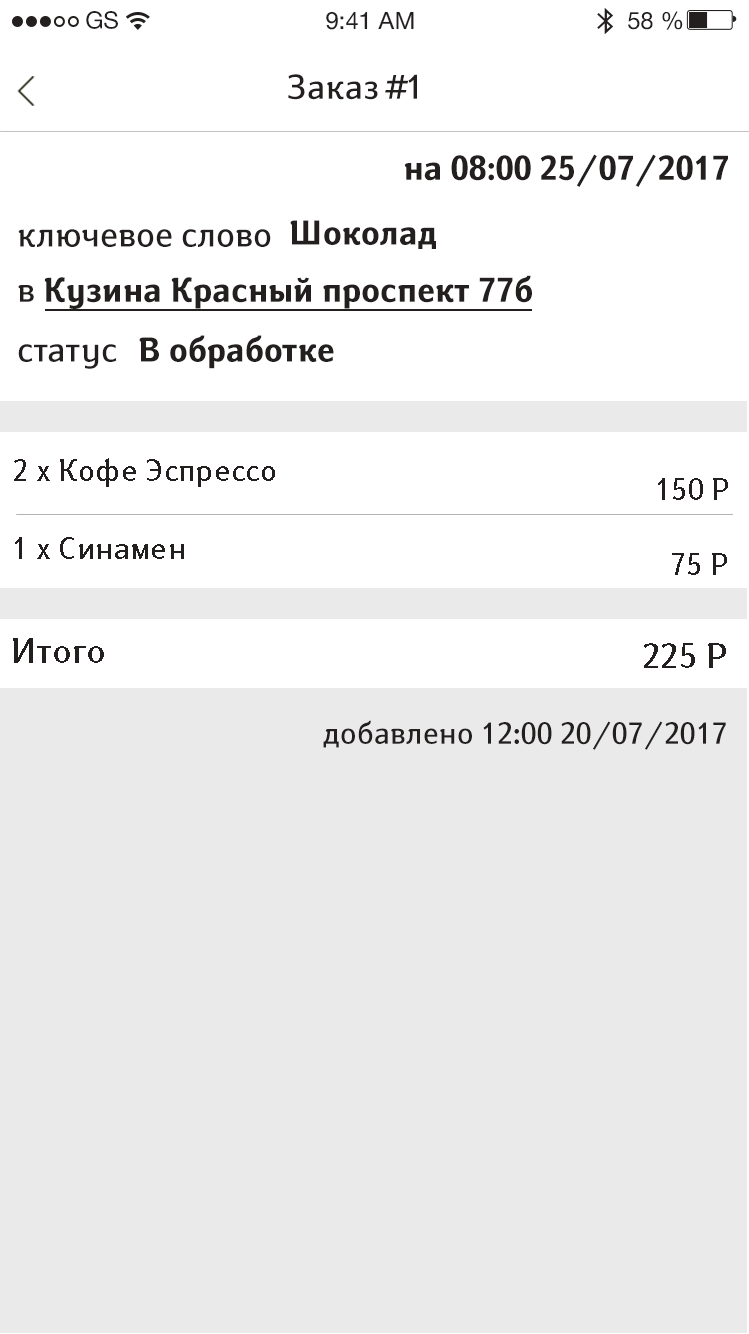
<style>
.page{position:relative;width:749px;height:1334px;background:#eaeaea}
.page>*{position:absolute;margin:0}
.t1{font:24px "HelveticaNeueCyr-Roman";color:#221f1e}
.t2{font:34px "SusanBook-Regular";color:#221f1e}
.t3{font:34px "SusanBold-Regular";color:#221f1e}
.t4{font:30px "SusanBook-Regular";letter-spacing:0.012em;color:#221f1e}
.t5{font:34px "SusanBook-Regular";letter-spacing:0.012em;color:#221f1e}
.t6{font:30px "SusanBook-Regular";color:#221f1e}
</style>
<div class="page">
<p class="t1" style="left:86px;top:11px;width:32px;height:18px">GS</p>
<p class="t1" style="left:326px;top:11px;width:88px;height:19px">9:41 AM</p>
<p class="t1" style="left:628px;top:11px;width:55px;height:19px">58 %</p>
<p class="t2" style="left:288px;top:74px;width:129px;height:26px">Заказ #1</p>
<p class="t3" style="left:404px;top:154px;width:324px;height:33px">на 08:00 25/07/2017</p>
<p class="t3" style="left:290px;top:220px;width:146px;height:29px">Шоколад</p>
<p class="t2" style="left:18px;top:229px;width:253px;height:18px">ключевое слово</p>
<p class="t3" style="left:18px;top:275px;width:514px;height:34px"><span class="t2">в </span>Кузина Красный проспект 77б</p>
<p class="t3" style="left:139px;top:335px;width:195px;height:34px">В обработке</p>
<p class="t2" style="left:18px;top:344px;width:99px;height:25px">статус</p>
<p class="t4" style="left:14px;top:458px;width:261px;height:29px">2 х Кофе Эспрессо</p>
<p class="t4" style="left:658px;top:478px;width:70px;height:22px">150 Р</p>
<p class="t4" style="left:15px;top:537px;width:169px;height:22px">1 х Синамен</p>
<p class="t4" style="left:672px;top:553px;width:55px;height:22px">75 Р</p>
<p class="t5" style="left:13px;top:638px;width:91px;height:25px">Итого</p>
<p class="t5" style="left:644px;top:643px;width:82px;height:25px">225 Р</p>
<p class="t6" style="left:323px;top:720px;width:403px;height:30px">добавлено 12:00 20/07/2017</p>
</div>
